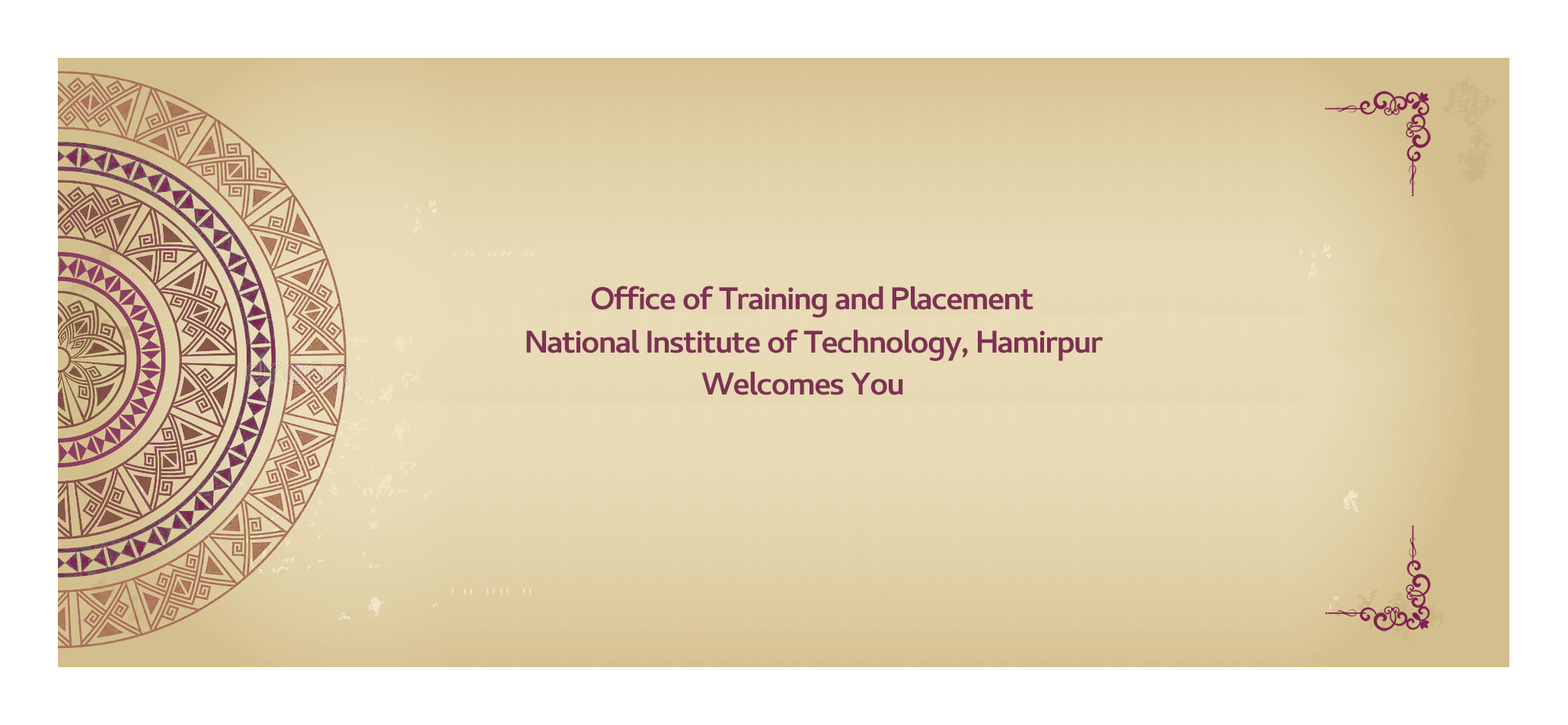
<style>
.page{position:relative;width:1568px;height:725px;background:#ffffff}
.page>*{position:absolute;margin:0}
.t1{font:31.7px "Cantarell-Bold";letter-spacing:-0.04em;color:#7e3153}
</style>
<div class="page">
<p class="t1" style="left:591px;top:286px;width:442px;height:32px">Office of Training and Placement</p>
<p class="t1" style="left:526px;top:329px;width:577px;height:32px">National Institute of Technology, Hamirpur</p>
<p class="t1" style="left:701px;top:372px;width:202px;height:23px">Welcomes You</p>
</div>
